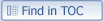
<style>
.page{position:relative;width:104px;height:21px}
.page>*{position:absolute;margin:0}
.t1{font:12px "Tahoma";color:#3d5f95}
</style>
<div class="page">
<p class="t1" style="left:22px;top:6px;width:61px;height:10px">Find in TOC</p>
</div>
